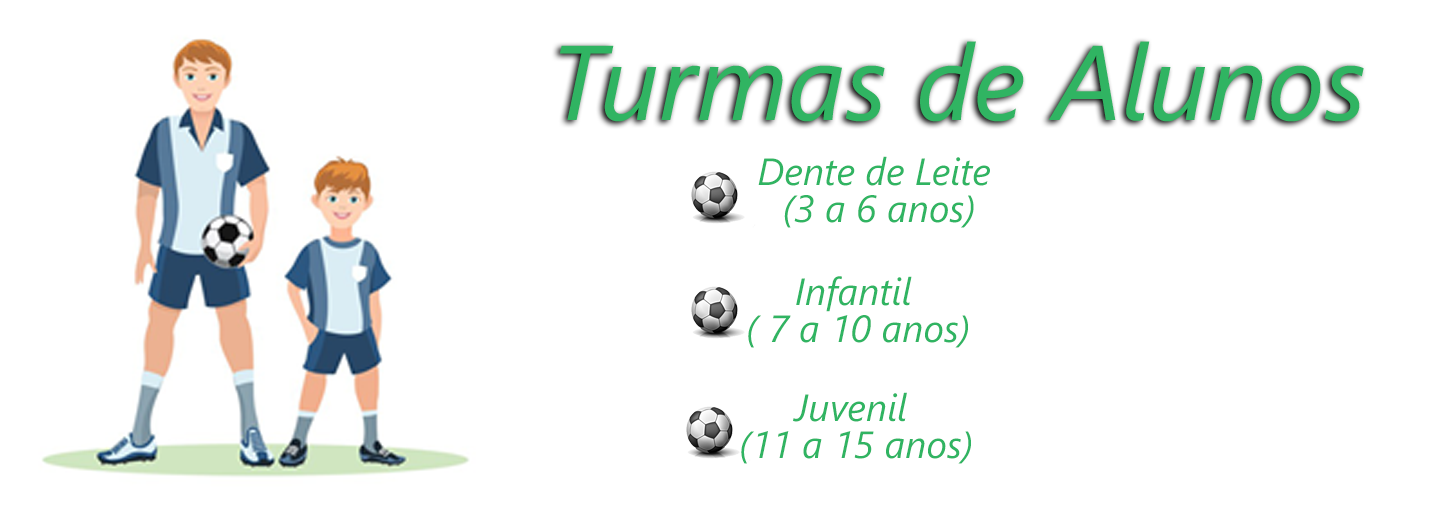
<style>
.page{position:relative;width:1447px;height:513px;background:#ffffff}
.page>*{position:absolute;margin:0}
.t1{font:106px "SegoeUI-Italic";color:#30b462}
.t2{font:38px/37px "SegoeUI-Italic";color:#30b462}
</style>
<div class="page">
<p class="t1" style="left:560px;top:41px;width:804px;height:81px">Turmas de Alunos</p>
<p class="t2" style="left:758px;top:156px;width:232px;height:72px;text-align:center">Dente de Leite<br> (3 a 6 anos)</p>
<p class="t2" style="left:748px;top:276px;width:220px;height:72px;text-align:center">Infantil<br> ( 7 a 10 anos)</p>
<p class="t2" style="left:741px;top:392px;width:230px;height:72px;text-align:center">Juvenil<br>  (11 a 15 anos)</p>
</div>
